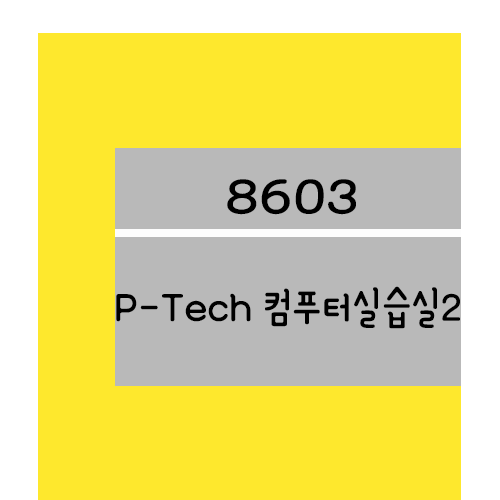
<style>
.page{position:relative;width:500px;height:500px;background:#fee82d}
.page>*{position:absolute;margin:0}
.t1{font:61.2px "YanoljaYacheR";color:#000000;scale:1.18 1}
.t2{font:48px "YanoljaYacheR";color:#000000}
</style>
<div class="page">
<p class="t1" style="left:227px;top:179px;width:129px;height:36px">8603</p>
<p class="t2" style="left:116px;top:286px;width:344px;height:43px">P-Tech 컴푸터실습실2</p>
</div>
